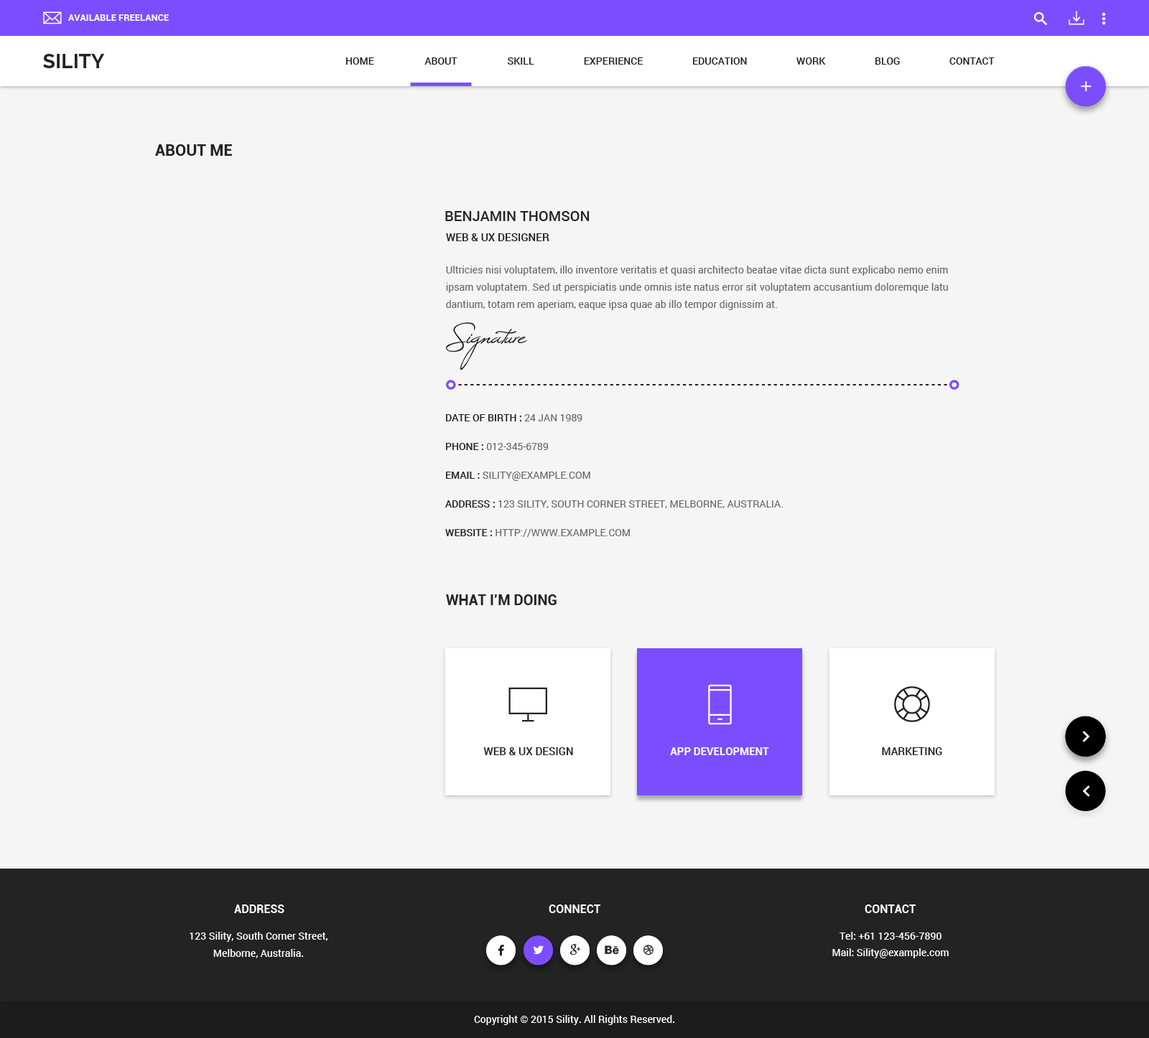
<style>
.page{position:relative;width:1149px;height:1038px;background:#f5f5f5}
.page>*{position:absolute;margin:0}
.t1{font:9.3px "Roboto-Bold";color:#ffffff;text-transform:uppercase}
.t2{font:20.1px "Raleway-Bold";color:#232323}
.t3{font:10.1px "Roboto-Medium";color:#232323;text-transform:uppercase}
.t4{font:15.8px "Roboto-Bold";color:#232323}
.t5{font:14.4px "Roboto-Medium";color:#232323;text-transform:uppercase}
.t6{font:10.8px "Roboto-Medium";color:#232323;text-transform:uppercase}
.t7{font:10.1px/17.2px "Roboto-Regular";color:#666666}
.t8{font:10.1px/17.2px "Roboto-Medium";color:#666666}
.t9{font:11.5px "Roboto-Medium";letter-spacing:0.2em;color:#232323}
.t10{font:10.1px "Roboto-Regular";color:#666666;text-transform:uppercase}
.t11{font:14.4px "Roboto-Bold";color:#232323}
.t12{font:10.8px "Roboto-Bold";color:#ffffff;text-transform:uppercase}
.t13{font:11.5px "Roboto-Bold";color:#ffffff;text-transform:uppercase}
.t14{font:10.1px/17.2px "Roboto-Medium";color:#ffffff}
.t15{font:10.1px "Roboto-Medium";color:#ffffff}
</style>
<div class="page">
<p class="t1" style="left:68px;top:14px;width:101px;height:7px">available freelance</p>
<p class="t2" style="left:43px;top:54px;width:62px;height:14px">SILITY</p>
<p class="t3" style="left:346px;top:57px;width:28px;height:8px">home</p>
<p class="t3" style="left:424px;top:57px;width:33px;height:8px">about</p>
<p class="t3" style="left:508px;top:57px;width:26px;height:8px">skill</p>
<p class="t3" style="left:584px;top:57px;width:59px;height:8px">experience</p>
<p class="t3" style="left:693px;top:57px;width:54px;height:8px">education</p>
<p class="t3" style="left:796px;top:57px;width:30px;height:8px">work</p>
<p class="t3" style="left:875px;top:57px;width:25px;height:8px">blog</p>
<p class="t3" style="left:949px;top:57px;width:45px;height:8px">Contact</p>
<p class="t4" style="left:155px;top:144px;width:77px;height:12px">ABOUT ME</p>
<p class="t5" style="left:445px;top:211px;width:144px;height:10px">Benjamin Thomson</p>
<p class="t6" style="left:446px;top:233px;width:103px;height:8px">Web &amp; UX Designer</p>
<p class="t7" style="left:446px;top:266px;width:502px;height:44px">Ultricies nisi voluptatem, illo inventore veritatis et quasi architecto beatae vitae dicta sunt explicabo nemo enim ipsam voluptatem. Sed ut perspiciatis unde omnis iste natus error sit voluptatem accusantium doloremque latu dantium, totam rem aperiam, eaque ipsa quae ab illo tempor dignissim at. <br><span class="t8">My Philosophy Etiam eget mi enim, non ultricies nisi voluptatem, illo inventore veritatis et quasi architecto beatae vitae dicta sunt explicabo nemo enim ipsam voluptatem.</span></p>
<p class="t9" style="left:446px;top:384px;width:501px;height:2px">-----------------------------------------------------------------------------------</p>
<p class="t3" style="left:446px;top:414px;width:136px;height:7px">Date of birth : <span class="t10">24 jan 1989</span></p>
<p class="t10" style="left:446px;top:443px;width:102px;height:7px"><span class="t3">phone : </span>012-345-6789</p>
<p class="t10" style="left:446px;top:472px;width:144px;height:9px"><span class="t3">Email : </span>Sility@example.com</p>
<p class="t10" style="left:445px;top:500px;width:338px;height:8px"><span class="t3">Address : </span>123 Sility, south corner street, melborne, australia.</p>
<p class="t10" style="left:445px;top:529px;width:185px;height:8px"><span class="t3">Website : </span>http://www.example.com</p>
<p class="t11" style="left:446px;top:594px;width:110px;height:11px">WHAT I’M DOING</p>
<p class="t6" style="left:483px;top:747px;width:90px;height:8px">Web &amp; ux Design</p>
<p class="t12" style="left:670px;top:747px;width:99px;height:8px">APP DEVELOPMENT</p>
<p class="t6" style="left:882px;top:747px;width:60px;height:8px">marketing</p>
<p class="t13" style="left:234px;top:905px;width:50px;height:8px">Address</p>
<p class="t13" style="left:548px;top:905px;width:52px;height:8px">connect</p>
<p class="t13" style="left:864px;top:905px;width:51px;height:8px">contact</p>
<p class="t14" style="left:190px;top:932px;width:138px;height:26px;text-align:center">123 Sility, South Corner Street,<br>Melborne, Australia.</p>
<p class="t15" style="left:839px;top:932px;width:102px;height:8px">Tel: +61 123-456-7890</p>
<p class="t15" style="left:832px;top:948px;width:116px;height:10px">Mail: Sility@example.com</p>
<p class="t15" style="left:474px;top:1015px;width:201px;height:10px">Copyright © 2015 Sility. All Rights Reserved.</p>
</div>
